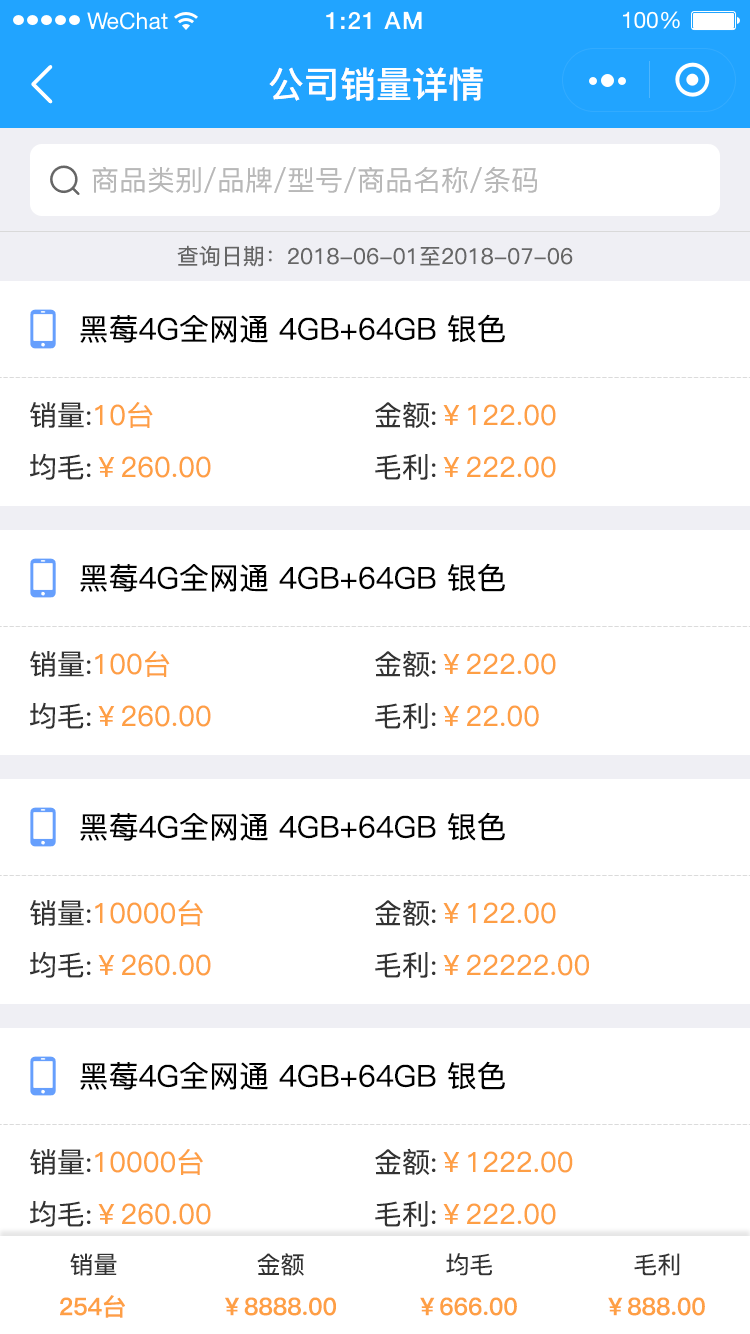
<style>
.page{position:relative;width:750px;height:1334px;background:#ffffff}
.page>*{position:absolute;margin:0}
.t1{font:36px "PingFang-SC-Bold";color:#ffffff}
.t2{font:28px "PingFang-SC-Medium";color:#b8b8b8}
.t3{font:22px "PingFang-SC-Medium";color:#666666}
.t4{font:30px "PingFang-SC-Medium";color:#000000}
.t5{font:28px "PingFang-SC-Medium";color:#fe9f45}
.t6{font:28px "PingFang-SC-Medium";color:#333333}
.t7{font:24px "PingFang-SC-Medium";color:#333333}
.t8{font:24px "PingFang-SC-Bold";color:#fe9f45}
</style>
<div class="page">
<p class="t1" style="left:269px;top:67px;width:214px;height:34px">公司销量详情</p>
<p class="t2" style="left:92px;top:166px;width:445px;height:27px">商品类别/品牌/型号/商品名称/条码</p>
<p class="t3" style="left:177px;top:245px;width:396px;height:22px">查询日期：2018-06-01至2018-07-06</p>
<p class="t4" style="left:80px;top:314px;width:425px;height:29px">黑莓4G全网通 4GB+64GB 银色</p>
<p class="t5" style="left:375px;top:401px;width:181px;height:27px"><span class="t6">金额:</span>￥122.00</p>
<p class="t6" style="left:30px;top:402px;width:123px;height:26px">销量:<span class="t5">10台</span></p>
<p class="t5" style="left:30px;top:453px;width:181px;height:27px"><span class="t6">均毛:</span>￥260.00</p>
<p class="t5" style="left:375px;top:454px;width:181px;height:26px"><span class="t6">毛利:</span>￥222.00</p>
<p class="t4" style="left:80px;top:563px;width:425px;height:29px">黑莓4G全网通 4GB+64GB 银色</p>
<p class="t5" style="left:30px;top:651px;width:140px;height:26px"><span class="t6">销量:</span>100台</p>
<p class="t5" style="left:375px;top:650px;width:181px;height:27px"><span class="t6">金额:</span>￥222.00</p>
<p class="t5" style="left:30px;top:702px;width:181px;height:27px"><span class="t6">均毛:</span>￥260.00</p>
<p class="t5" style="left:375px;top:703px;width:164px;height:26px"><span class="t6">毛利:</span>￥22.00</p>
<p class="t4" style="left:80px;top:812px;width:425px;height:29px">黑莓4G全网通 4GB+64GB 银色</p>
<p class="t5" style="left:30px;top:900px;width:173px;height:26px"><span class="t6">销量:</span>10000台</p>
<p class="t5" style="left:375px;top:899px;width:181px;height:27px"><span class="t6">金额:</span>￥122.00</p>
<p class="t5" style="left:30px;top:951px;width:181px;height:27px"><span class="t6">均毛:</span>￥260.00</p>
<p class="t5" style="left:375px;top:952px;width:214px;height:26px"><span class="t6">毛利:</span>￥22222.00</p>
<p class="t4" style="left:80px;top:1061px;width:425px;height:29px">黑莓4G全网通 4GB+64GB 银色</p>
<p class="t5" style="left:30px;top:1149px;width:173px;height:26px"><span class="t6">销量:</span>10000台</p>
<p class="t5" style="left:375px;top:1148px;width:198px;height:27px"><span class="t6">金额:</span>￥1222.00</p>
<p class="t5" style="left:30px;top:1200px;width:181px;height:27px"><span class="t6">均毛:</span>￥260.00</p>
<p class="t5" style="left:375px;top:1201px;width:181px;height:26px"><span class="t6">毛利:</span>￥222.00</p>
<p class="t7" style="left:70px;top:1253px;width:47px;height:23px">销量</p>
<p class="t7" style="left:257px;top:1253px;width:47px;height:23px">金额</p>
<p class="t7" style="left:446px;top:1253px;width:46px;height:23px">均毛</p>
<p class="t7" style="left:634px;top:1253px;width:46px;height:23px">毛利</p>
<p class="t8" style="left:60px;top:1295px;width:65px;height:23px">254台</p>
<p class="t8" style="left:225px;top:1297px;width:111px;height:19px">￥8888.00</p>
<p class="t8" style="left:420px;top:1297px;width:97px;height:19px">￥666.00</p>
<p class="t8" style="left:608px;top:1297px;width:97px;height:19px">￥888.00</p>
</div>
